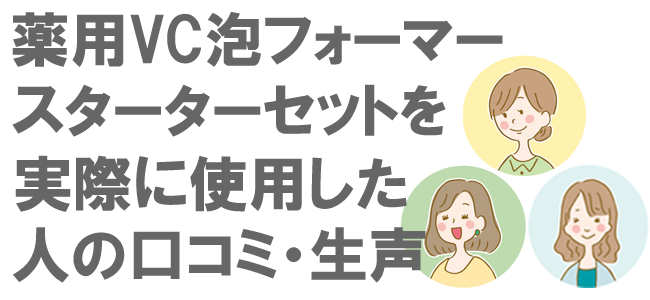
<style>
.page{position:relative;width:650px;height:300px;background:#ffffff}
.page>*{position:absolute;margin:0}
.t1{font:60px "HGPSoeiKakugothicUB";color:#666666}
</style>
<div class="page">
<p class="t1" style="left:12px;top:11px;width:491px;height:56px">薬用VC泡フォーマー</p>
<p class="t1" style="left:12px;top:84px;width:434px;height:53px">スターターセットを</p>
<p class="t1" style="left:15px;top:155px;width:392px;height:57px">実際に使用した</p>
<p class="t1" style="left:13px;top:227px;width:413px;height:56px">人の口コミ・生声</p>
</div>
